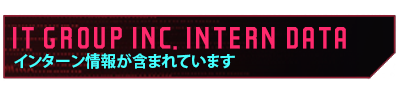
<style>
.page{position:relative;width:400px;height:95px;background:#ffffff}
.page>*{position:absolute;margin:0}
.t1{font:52.5px "Party-Lights-[WLM]-Flat";color:#ff296d}
.t2{font:15.7px "KozGoPr6N-Bold";color:#43ffff}
</style>
<div class="page">
<p class="t1" style="left:13px;top:27px;width:333px;height:23px">it group inc. intern data</p>
<p class="t2" style="left:14px;top:53px;width:221px;height:16px">インターン情報が含まれています</p>
</div>
